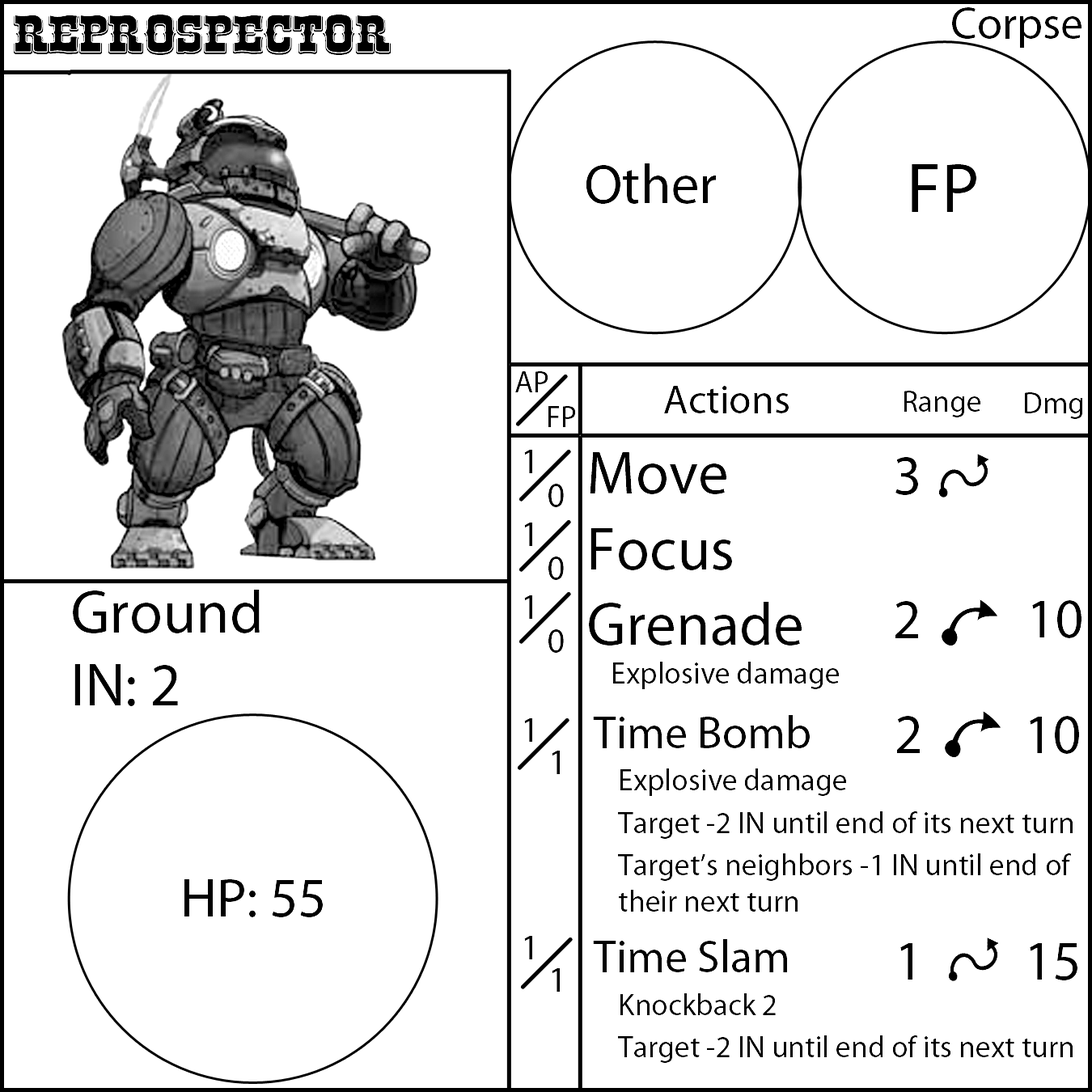
<style>
.page{position:relative;width:1092px;height:1092px;background:#ffffff}
.page>*{position:absolute;margin:0}
.t1{font:55.6px "RioGrande-Bold";color:#000000}
.t2{font:55.6px "MyriadPro-Regular";color:#000000}
.t3{font:70.8px "MyriadPro-Regular";color:#000000}
.t4{font:30.3px "MyriadPro-Regular";color:#000000}
.t5{font:40.4px "MyriadPro-Regular";color:#000000}
.t6{font:35.4px "MyriadPro-Regular";color:#000000}
.t7{font:60.7px "MyriadPro-Regular";color:#000000}
.t8{font:45.5px "MyriadPro-Regular";color:#000000}
</style>
<div class="page">
<p class="t1" style="left:14px;top:15px;width:377px;height:40px">Reprospector</p>
<p class="t2" style="left:586px;top:163px;width:131px;height:41px">Other</p>
<p class="t3" style="left:912px;top:164px;width:64px;height:48px">FP</p>
<p class="t4" style="left:515px;top:371px;width:33px;height:21px">AP</p>
<p class="t5" style="left:664px;top:386px;width:125px;height:27px">Actions</p>
<p class="t4" style="left:904px;top:391px;width:77px;height:26px">Range</p>
<p class="t4" style="left:1024px;top:392px;width:59px;height:27px">Dmg</p>
<p class="t4" style="left:548px;top:406px;width:28px;height:21px">FP</p>
<p class="t6" style="left:524px;top:450px;width:8px;height:169px">1<br>1<br>1</p>
<p class="t7" style="left:589px;top:452px;width:251px;height:237px">Move<br>Focus<br>Grenade<br><span class="t4"> Explosive damage</span></p>
<p class="t2" style="left:895px;top:457px;width:23px;height:181px;text-align:center">3<br><br>2</p>
<p class="t6" style="left:548px;top:484px;width:16px;height:169px">0<br>0<br>0</p>
<p class="t7" style="left:73px;top:590px;width:187px;height:116px">Ground<br>IN: 2</p>
<p class="t2" style="left:1032px;top:600px;width:49px;height:38px">10</p>
<p class="t6" style="left:524px;top:718px;width:8px;height:241px">1<br><br><br>1</p>
<p class="t4" style="left:593px;top:715px;width:480px;height:348px"><span class="t8">Time Bomb<br></span> Explosive damage<br> Target -2 IN until end of its next turn<br> Target’s neighbors -1 IN until end of    their next turn<br><span class="t8">Time Slam<br></span> Knockback 2<br> Target -2 IN until end of its next turn</p>
<p class="t2" style="left:896px;top:716px;width:24px;height:264px">2<br><br> <br>1</p>
<p class="t2" style="left:1030px;top:716px;width:49px;height:264px">10<br><br> <br>15</p>
<p class="t6" style="left:552px;top:751px;width:8px;height:241px">1<br><br><br>1</p>
<p class="t2" style="left:184px;top:879px;width:139px;height:38px">HP: 55</p>
</div>
